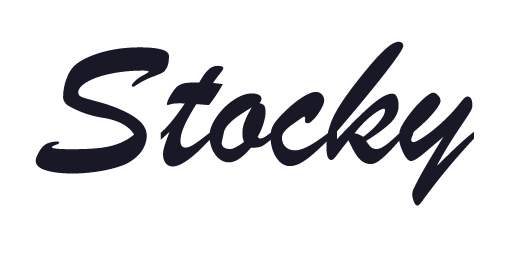
<style>
.page{position:relative;width:512px;height:256px;background:#ffffff}
.page>*{position:absolute;margin:0}
.t1{font:195.5px "BrushScriptMT";color:#181827}
</style>
<div class="page">
<p class="t1" style="left:35px;top:41px;width:439px;height:165px">Stocky</p>
</div>
